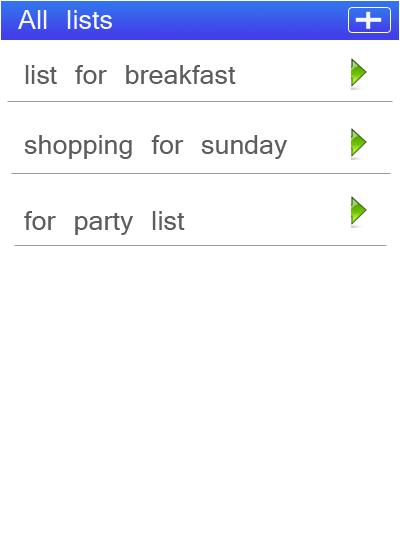
<style>
.page{position:relative;width:400px;height:540px;background:#ffffff}
.page>*{position:absolute;margin:0}
.t1{font:30px "Vrinda";color:#f6f7fa}
.t2{font:30px "Vrinda";color:#5d5d5d}
</style>
<div class="page">
<p class="t1" style="left:18px;top:10px;width:94px;height:19px">All lists</p>
<p class="t2" style="left:25px;top:65px;width:211px;height:19px">list for breakfast</p>
<p class="t2" style="left:24px;top:135px;width:263px;height:24px">shopping for sunday</p>
<p class="t2" style="left:24px;top:211px;width:161px;height:24px">for party list</p>
</div>
